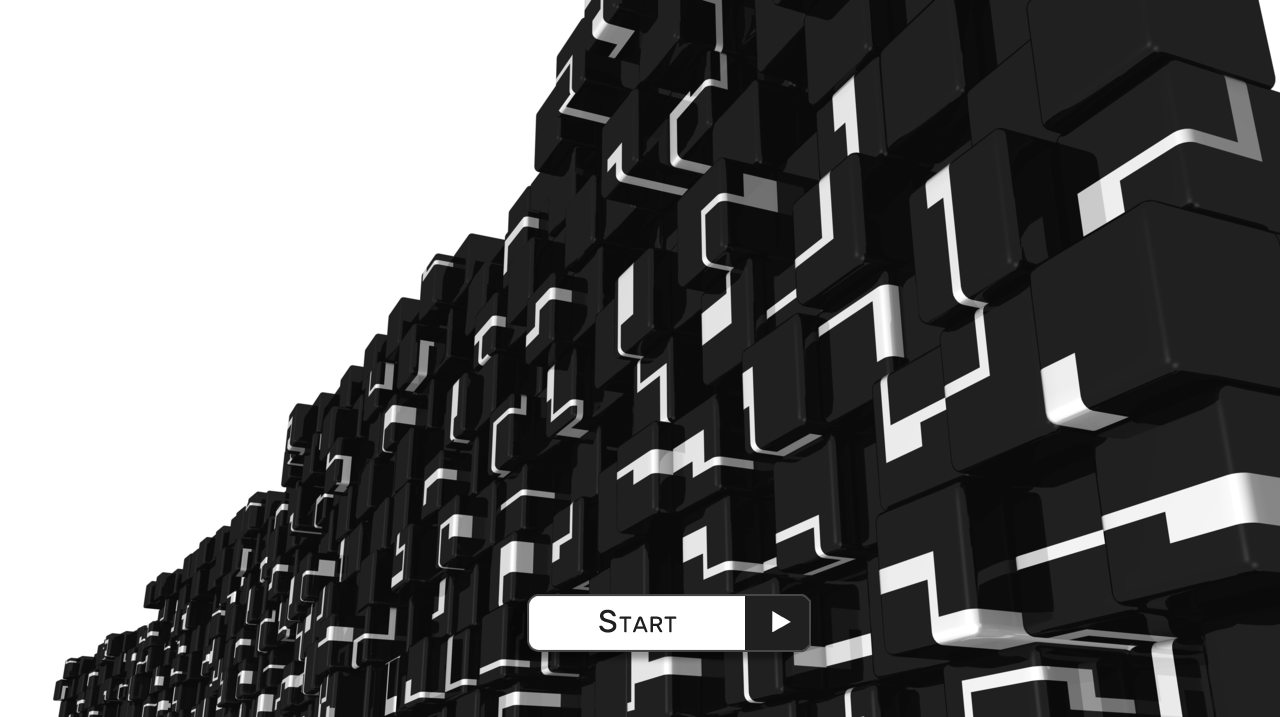
<style>
.page{position:relative;width:1280px;height:717px;background:#ffffff}
.page>*{position:absolute;margin:0}
.t1{font:31.4px "Rubik-Regular";letter-spacing:0.05em;color:#202020;font-variant:small-caps}
</style>
<div class="page">
<p class="t1" style="left:599px;top:609px;width:78px;height:24px">Start</p>
</div>
